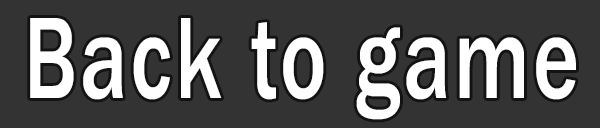
<style>
.page{position:relative;width:600px;height:128px;background:#333333}
.page>*{position:absolute;margin:0}
.t1{font:120px "FranklinGothic-Medium";letter-spacing:0.04em;color:#ffffff;scale:0.72 1}
</style>
<div class="page">
<p class="t1" style="left:30px;top:18px;width:546px;height:102px">Back to game</p>
</div>
